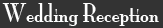
<style>
.page{position:relative;width:163px;height:28px;background:#333333}
.page>*{position:absolute;margin:0}
.t1{font:24px "MonaLisaSolidITCTT";color:#fefefe}
</style>
<div class="page">
<p class="t1" style="left:2px;top:3px;width:157px;height:23px">Wedding Reception</p>
</div>
